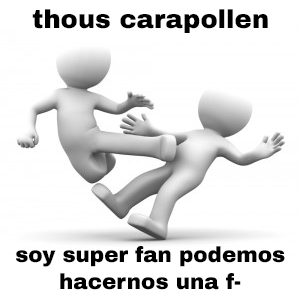
<style>
.page{position:relative;width:300px;height:300px;background:#ffffff}
.page>*{position:absolute;margin:0}
.t1{font:25.8px "ArchivoBlack-Regular";color:#000000}
.t2{font:21.4px "ArchivoBlack-Regular";color:#000000}
</style>
<div class="page">
<p class="t1" style="left:32px;top:9px;width:236px;height:24px">thous carapollen</p>
<p class="t2" style="left:16px;top:246px;width:269px;height:44px;text-align:center">soy super fan podemos<br>hacernos una f-</p>
</div>
